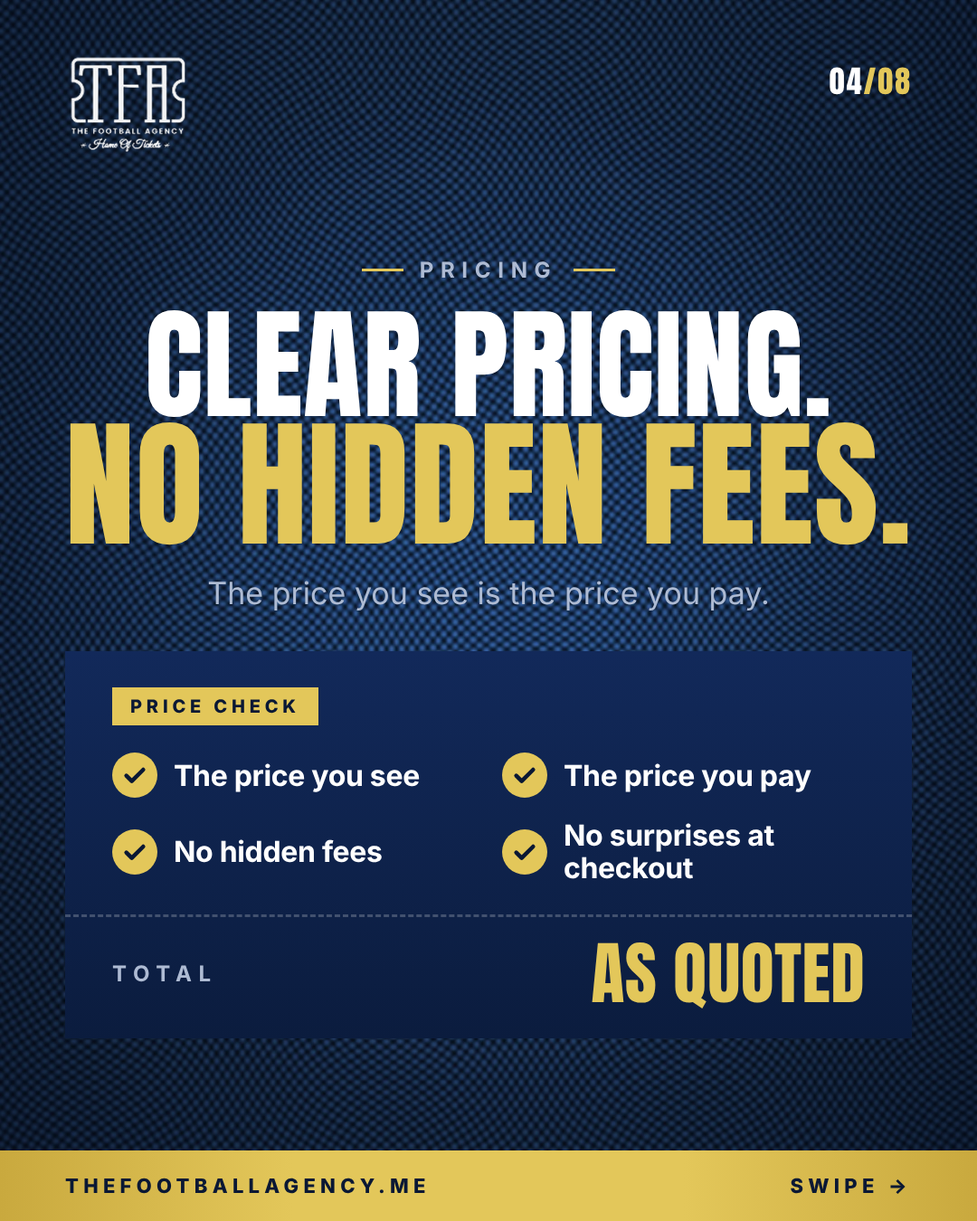
<style>
.page{position:relative;width:977px;height:1221px}
.page>*{position:absolute;margin:0}
.t1{font:30.7px "Anton-Regular";letter-spacing:0.06em;color:#e3c75a}
.t2{font:30.7px "Anton-Regular";letter-spacing:0.06em;color:#ffffff}
.t3{font:21.7px "Inter-Bold";letter-spacing:0.32em;color:#aebbd3}
.t4{font:121.9px "Anton-Regular";letter-spacing:0.005em;color:#ffffff}
.t5{font:139.6px "Anton-Regular";letter-spacing:0.005em;color:#e3c75a}
.t6{font:30.7px "Inter-Regular";color:#aebbd3}
.t7{font:18.1px "Inter-ExtraBold";letter-spacing:0.24em;color:#0a1834}
.t8{font:28.9px "Inter-Bold";letter-spacing:-0.01em;color:#ffffff}
.t9{font:28.9px/31.8px "Inter-Bold";letter-spacing:-0.01em;color:#ffffff}
.t10{font:68.7px "Anton-Regular";letter-spacing:0.005em;color:#e3c75a}
.t11{font:19.9px "Inter-ExtraBold";letter-spacing:0.24em;color:#0a1834}
</style>
<div class="page">
<p class="t1" style="left:829px;top:67px;width:81px;height:28px"><span class="t2">04</span>/08</p>
<p class="t3" style="left:421px;top:261px;width:129px;height:18px">PRICING</p>
<p class="t4" style="left:148px;top:310px;width:680px;height:107px">CLEAR PRICING.</p>
<p class="t5" style="left:70px;top:422px;width:838px;height:123px">NO HIDDEN FEES.</p>
<p class="t6" style="left:208px;top:581px;width:560px;height:29px">The price you see is the price you pay.</p>
<p class="t7" style="left:131px;top:699px;width:165px;height:15px">PRICE CHECK</p>
<p class="t8" style="left:175px;top:763px;width:245px;height:29px">The price you see</p>
<p class="t8" style="left:564px;top:763px;width:247px;height:29px">The price you pay</p>
<p class="t9" style="left:564px;top:823px;width:210px;height:56px">No surprises at<br>checkout</p>
<p class="t8" style="left:175px;top:839px;width:207px;height:24px">No hidden fees</p>
<p class="t10" style="left:591px;top:942px;width:272px;height:66px">AS QUOTED</p>
<p class="t3" style="left:112px;top:965px;width:99px;height:17px">TOTAL</p>
<p class="t11" style="left:65px;top:1177px;width:360px;height:17px">THEFOOTBALLAGENCY.ME</p>
<p class="t11" style="left:790px;top:1177px;width:115px;height:17px">SWIPE →</p>
</div>
